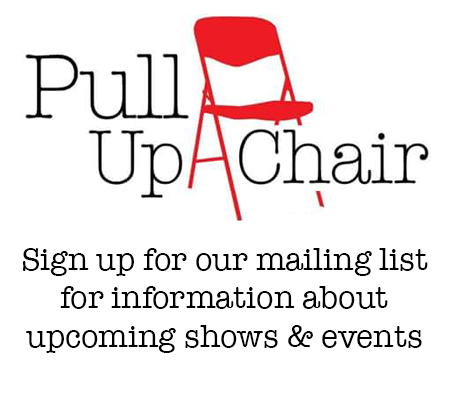
<style>
.page{position:relative;width:450px;height:400px;background:#ffffff}
.page>*{position:absolute;margin:0}
.t1{font:32px "AmericanTypewriter";color:#000000}
</style>
<div class="page">
<p class="t1" style="left:22px;top:248px;width:406px;height:105px;text-align:center">Sign up for our mailing list<br>for information about<br>upcoming shows &amp; events</p>
</div>
